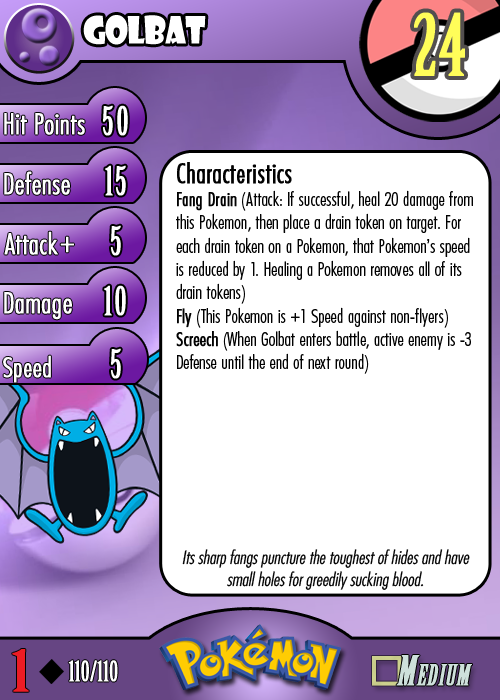
<style>
.page{position:relative;width:500px;height:700px;background:#ffffff}
.page>*{position:absolute;margin:0}
.t1{font:36.7px "ShowcardGothic-Reg";letter-spacing:-0.025em;color:#ffffff;scale:0.91 1}
.t2{font:83.3px "BirchStd";letter-spacing:0.025em;color:#fffd59;font-weight:bold}
.t3{font:27.8px "Futura-CondensedLight";color:#ffffff;font-weight:bold}
.t4{font:38.9px "BirchStd";letter-spacing:0.035em;color:#ffffff;font-weight:bold}
.t5{font:19.4px "FuturaCondensedBQ-Light";color:#010101}
.t6{font:27.8px "FuturaCondensedBQ-Light";color:#010101;font-weight:bold}
.t7{font:19.4px "FuturaCondensedBQ-Light";color:#010101;font-weight:bold}
.t8{font:30.6px "Futura-CondensedLight";color:#ffffff;font-weight:bold}
.t9{font:27.8px "FuturaCondensedBQ-Light";color:#ffffff;font-weight:bold}
.t10{font:18.1px "Futura-CondensedLight";color:#010101;font-style:italic}
.t11{font:55.6px "BirchStd";color:#ed1c24;font-weight:bold;scale:1.5 1}
.t12{font:27.8px "BirchStd";color:#ffffff;font-weight:bold}
</style>
<div class="page">
<p class="t1" style="left:83px;top:15px;width:123px;height:30px">golbat</p>
<p class="t2" style="left:414px;top:12px;width:51px;height:64px">24</p>
<p class="t3" style="left:4px;top:113px;width:81px;height:22px">Hit Points</p>
<p class="t4" style="left:103px;top:105px;width:25px;height:31px">50</p>
<p class="t3" style="left:4px;top:171px;width:66px;height:24px">Defense</p>
<p class="t4" style="left:105px;top:165px;width:21px;height:31px">15</p>
<p class="t5" style="left:176px;top:162px;width:297px;height:212px"><span class="t6">Characteristics<br></span><span class="t7">Fang Drain</span> (Attack: If successful, heal 20 damage from this Pokemon, then place a drain token on target. For each drain token on a Pokemon, that Pokemon’s speed is reduced by 1. Healing a Pokemon removes all of its drain tokens)<br><span class="t7">Fly</span> (This Pokemon is +1 Speed against non-flyers)<br><span class="t7">Screech</span> (When Golbat enters battle, active enemy is -3 Defense until the end of next round)</p>
<p class="t3" style="left:4px;top:231px;width:54px;height:24px">Attack</p>
<p class="t4" style="left:111px;top:225px;width:10px;height:31px">5</p>
<p class="t8" style="left:60px;top:236px;width:14px;height:17px">+</p>
<p class="t3" style="left:4px;top:292px;width:68px;height:28px">Damage</p>
<p class="t4" style="left:104px;top:285px;width:22px;height:31px">10</p>
<p class="t4" style="left:111px;top:348px;width:10px;height:31px">5</p>
<p class="t9" style="left:3px;top:355px;width:48px;height:28px">Speed</p>
<p class="t10" style="left:182px;top:549px;width:288px;height:41px;text-align:center">Its sharp fangs puncture the toughest of hides and have small holes for greedily sucking blood.</p>
<p class="t11" style="left:12px;top:649px;width:17px;height:43px">1</p>
<p class="t12" style="left:68px;top:660px;width:50px;height:22px">110/110</p>
</div>
